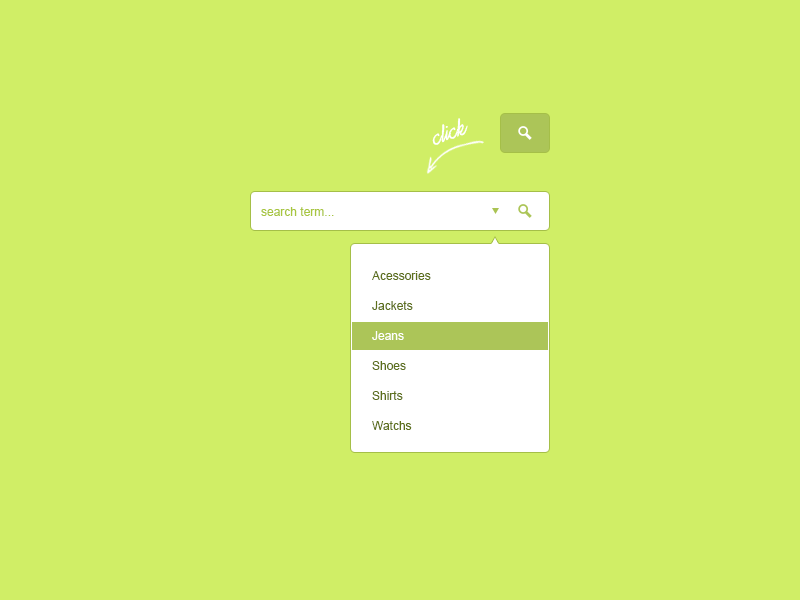
<style>
.page{position:relative;width:800px;height:600px;background:#d0ee66}
.page>*{position:absolute;margin:0}
.t1{font:12px "ArialMT";color:#a8c63f}
.t2{font:12px "ArialMT";color:#5d701b}
.t3{font:12px "ArialMT";color:#ffffff}
</style>
<div class="page">
<p class="t1" style="left:261px;top:207px;width:73px;height:9px">search term...</p>
<p class="t2" style="left:372px;top:271px;width:59px;height:9px">Acessories</p>
<p class="t2" style="left:372px;top:301px;width:41px;height:9px">Jackets</p>
<p class="t3" style="left:372px;top:331px;width:32px;height:9px">Jeans</p>
<p class="t2" style="left:372px;top:361px;width:34px;height:9px">Shoes</p>
<p class="t2" style="left:372px;top:391px;width:31px;height:9px">Shirts</p>
<p class="t2" style="left:372px;top:421px;width:40px;height:9px">Watchs</p>
</div>
